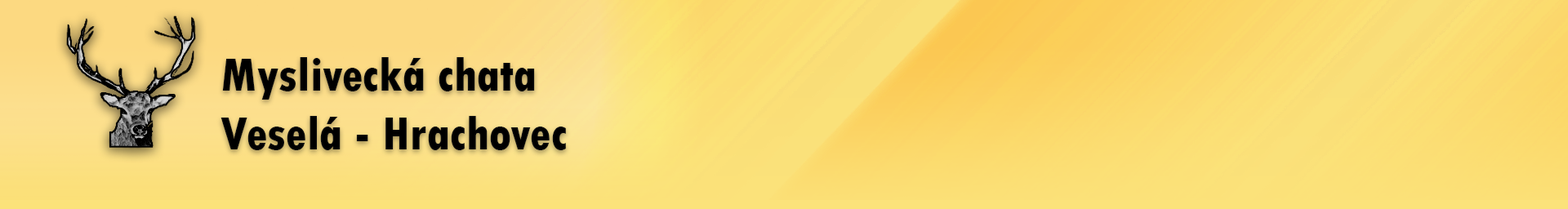
<style>
.page{position:relative;width:1568px;height:209px}
.page>*{position:absolute;margin:0}
.t1{font:49px "TwCenMT-CondensedExtraBold";color:#000000}
</style>
<div class="page">
<p class="t1" style="left:220px;top:57px;width:346px;height:93px">Myslivecká chata<br>Veselá - Hrachovec</p>
</div>
